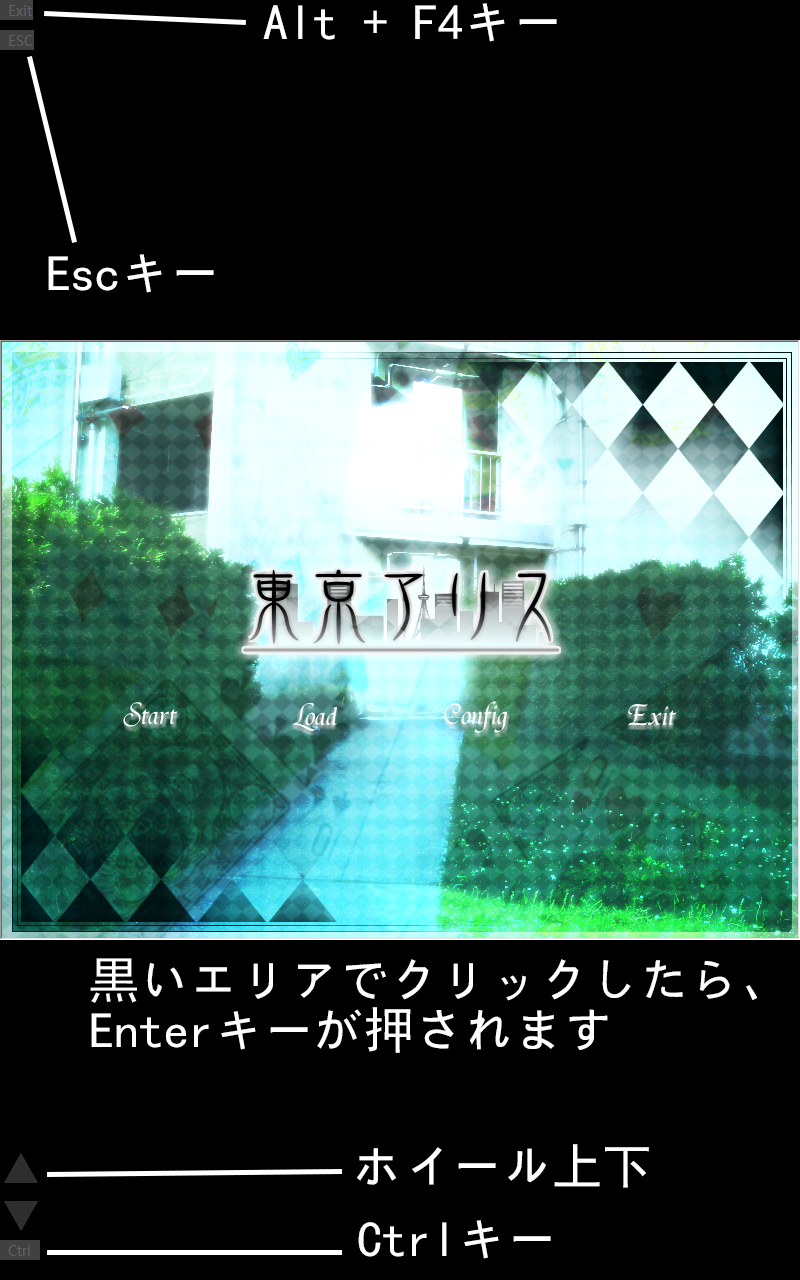
<style>
.page{position:relative;width:800px;height:1280px;background:#000000}
.page>*{position:absolute;margin:0}
.t1{font:50px "SimHei";color:#ffffff}
.t2{font:50px/50px "SimHei";color:#ffffff}
</style>
<div class="page">
<p class="t1" style="left:263px;top:3px;width:294px;height:39px">Alt + F4キー</p>
<p class="t1" style="left:48px;top:254px;width:166px;height:39px">Escキー</p>
<p class="t2" style="left:90px;top:958px;width:667px;height:95px">黒いエリアでクリックしたら、Enterキーが押されます</p>
<p class="t1" style="left:357px;top:1144px;width:292px;height:44px">ホイール上下</p>
<p class="t1" style="left:358px;top:1220px;width:193px;height:39px">Ctrlキー</p>
</div>
